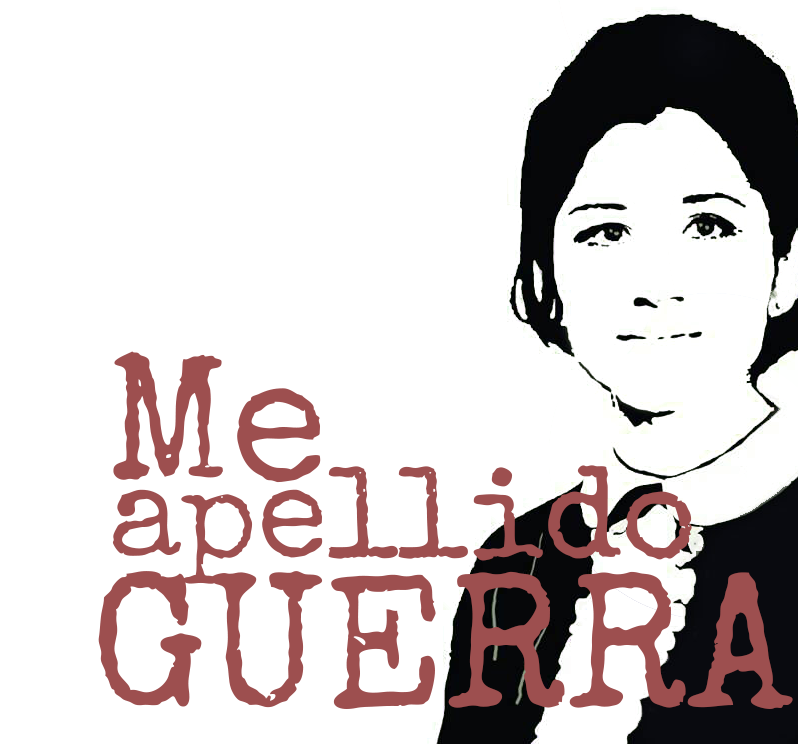
<style>
.page{position:relative;width:798px;height:744px;background:#ffffff}
.page>*{position:absolute;margin:0}
.t1{font:180px "SpecialElite-Regular";color:#9d4f4f}
.t2{font:130px "SpecialElite-Regular";color:#9d4f4f}
.t3{font:100px "SpecialElite-Regular";color:#849278}
.t4{font:190px "SpecialElite-Regular";color:#9d4f4f}
.t5{font:170px "SpecialElite-Regular";color:#849278}
</style>
<div class="page">
<p class="t1" style="left:113px;top:351px;width:208px;height:132px">Me</p>
<p class="t2" style="left:112px;top:465px;width:580px;height:119px"><span class="t3"> <br></span>apellido</p>
<p class="t4" style="left:98px;top:571px;width:695px;height:138px"><span class="t5"><br></span>GUERRA</p>
</div>
